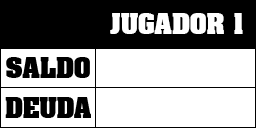
<style>
.page{position:relative;width:256px;height:128px;background:#ffffff}
.page>*{position:absolute;margin:0}
.t1{font:24px "AardvarkBold";color:#ffffff}
.t2{font:24px "AardvarkBold";color:#000000}
</style>
<div class="page">
<p class="t1" style="left:110px;top:13px;width:133px;height:21px">JUGADOR 1</p>
<p class="t2" style="left:6px;top:57px;width:84px;height:21px">SALDO</p>
<p class="t2" style="left:5px;top:97px;width:86px;height:21px">DEUDA</p>
</div>
